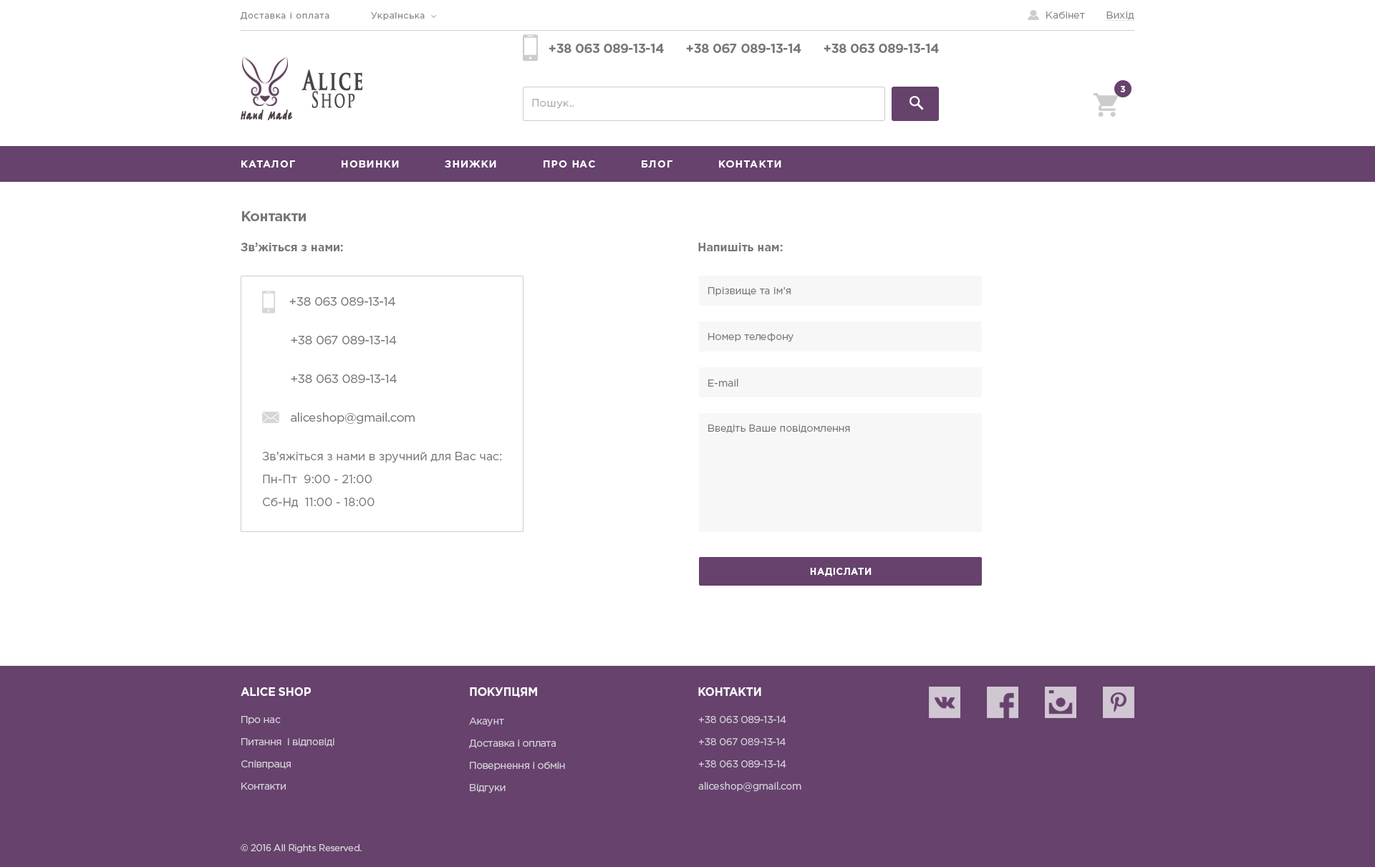
<style>
.page{position:relative;width:1375px;height:867px;background:#ffffff}
.page>*{position:absolute;margin:0}
.t1{font:8.6px "GothamPro";letter-spacing:0.075em;color:#888888}
.t2{font:10px "GothamPro";color:#888888}
.t3{font:10px "GothamPro";color:#888888;text-decoration:underline}
.t4{font:12.9px/17.9px "GothamPro-Bold";letter-spacing:-0.025em;color:#777777}
.t5{font:12.9px/17.9px "GothamPro";letter-spacing:-0.025em;color:#777777}
.t6{font:26.4px/17.6px "TrajanPro-Bold";letter-spacing:0.1em;color:#494249;font-weight:bold;scale:0.67 1}
.t7{font:21.1px/17.6px "TrajanPro-Regular";letter-spacing:0.1em;color:#494249;font-weight:bold;scale:0.67 1}
.t8{font:8.6px "GothamPro-Bold";letter-spacing:0.01em;color:#ffffff;text-transform:uppercase}
.t9{font:10.7px "GothamPro";letter-spacing:0.01em;color:#aaaaaa}
.t10{font:12.2px "TagirCTT";letter-spacing:0.1em;color:#463c45;font-weight:bold;scale:0.65 1}
.t11{font:10px "GothamPro-Bold";letter-spacing:0.075em;color:#ffffff;text-transform:uppercase}
.t12{font:14.3px "GothamPro-Bold";letter-spacing:-0.025em;color:#777777}
.t13{font:11.5px "GothamPro-Bold";color:#777777}
.t14{font:10px "GothamPro";color:#777777}
.t15{font:12.2px/17.9px "GothamPro";letter-spacing:-0.025em;color:#777777}
.t16{font:12.2px/15px "GothamPro";letter-spacing:-0.025em;color:#777777}
.t17{font:11.5px/17.2px "GothamPro";color:#777777}
.t18{font:9.3px "GothamPro-Bold";letter-spacing:0.05em;color:#ffffff;text-transform:uppercase}
.t19{font:11.5px "GothamPro-Bold";letter-spacing:-0.025em;color:#fafafa;text-transform:uppercase}
.t20{font:10px/15px "GothamPro";letter-spacing:-0.025em;color:#d4ced6}
.t21{font:9.3px "GothamPro";letter-spacing:-0.025em;color:#d4ced6}
</style>
<div class="page">
<p class="t1" style="left:240px;top:12px;width:89px;height:8px">Доставка і оплата</p>
<p class="t1" style="left:371px;top:12px;width:54px;height:8px">Українська</p>
<p class="t2" style="left:1046px;top:11px;width:39px;height:8px">Кабінет</p>
<p class="t3" style="left:1106px;top:11px;width:28px;height:10px">Вихід</p>
<p class="t4" style="left:549px;top:44px;width:115px;height:9px">+38 063 089-13-14<span class="t5"> <br>е</span></p>
<p class="t4" style="left:686px;top:44px;width:115px;height:9px">+38 067 089-13-14<span class="t5"> <br>е</span></p>
<p class="t4" style="left:824px;top:44px;width:115px;height:9px">+38 063 089-13-14<span class="t5"> <br>е</span></p>
<p class="t6" style="left:301px;top:69px;width:61px;height:39px">Alice<br> <span class="t7">Shop</span></p>
<p class="t8" style="left:1120px;top:86px;width:6px;height:6px">3</p>
<p class="t9" style="left:532px;top:99px;width:42px;height:10px">Пошук..</p>
<p class="t10" style="left:241px;top:110px;width:51px;height:10px">Hand Made</p>
<p class="t11" style="left:241px;top:160px;width:54px;height:8px">каталог</p>
<p class="t11" style="left:342px;top:160px;width:57px;height:8px">Новинки</p>
<p class="t11" style="left:445px;top:160px;width:51px;height:8px">Знижки</p>
<p class="t11" style="left:544px;top:160px;width:51px;height:8px">Про нас</p>
<p class="t11" style="left:642px;top:160px;width:30px;height:8px">Блог</p>
<p class="t11" style="left:719px;top:160px;width:62px;height:8px">Контакти</p>
<p class="t12" style="left:242px;top:211px;width:64px;height:10px">Контакти</p>
<p class="t13" style="left:241px;top:243px;width:102px;height:8px">Зв’жіться з нами:</p>
<p class="t13" style="left:698px;top:243px;width:85px;height:8px">Напишіть нам:</p>
<p class="t14" style="left:708px;top:287px;width:83px;height:9px">Прізвище та ім’я</p>
<p class="t15" style="left:289px;top:297px;width:106px;height:9px">+38 063 089-13-14 <br>е</p>
<p class="t15" style="left:291px;top:336px;width:106px;height:8px">+38 067 089-13-14 <br>е</p>
<p class="t14" style="left:708px;top:333px;width:85px;height:9px">Номер телефону</p>
<p class="t15" style="left:291px;top:375px;width:106px;height:8px">+38 063 089-13-14 <br>е</p>
<p class="t14" style="left:708px;top:379px;width:30px;height:8px">E-mail</p>
<p class="t16" style="left:291px;top:412px;width:124px;height:12px">aliceshop@gmail.com<br><span class="t15">е</span></p>
<p class="t14" style="left:708px;top:425px;width:142px;height:8px">Введіть Ваше повідомлення</p>
<p class="t17" style="left:262px;top:452px;width:239px;height:56px">Зв’яжіться з нами в зручний для Вас час:<br>Пн-Пт  9:00 - 21:00<br>Сб-Нд  11:00 - 18:00</p>
<p class="t18" style="left:810px;top:568px;width:62px;height:8px">Надіслати</p>
<p class="t19" style="left:241px;top:687px;width:70px;height:9px">Alice Shop</p>
<p class="t19" style="left:470px;top:687px;width:67px;height:11px">Покупцям</p>
<p class="t19" style="left:698px;top:687px;width:63px;height:9px">Контакти</p>
<p class="t20" style="left:241px;top:716px;width:93px;height:74px">Про нас<br>Питання  і відповіді<br>Співпраця<br>Контакти</p>
<p class="t20" style="left:469px;top:718px;width:96px;height:75px">Акаунт<br>Доставка і оплата<br>Повернення і обмін<br>Відгуки</p>
<p class="t20" style="left:698px;top:716px;width:103px;height:76px">+38 063 089-13-14 <br>+38 067 089-13-14 <br>+38 063 089-13-14 <br>aliceshop@gmail.com</p>
<p class="t21" style="left:241px;top:844px;width:121px;height:10px">© 2016 All Rights Reserved.</p>
</div>
